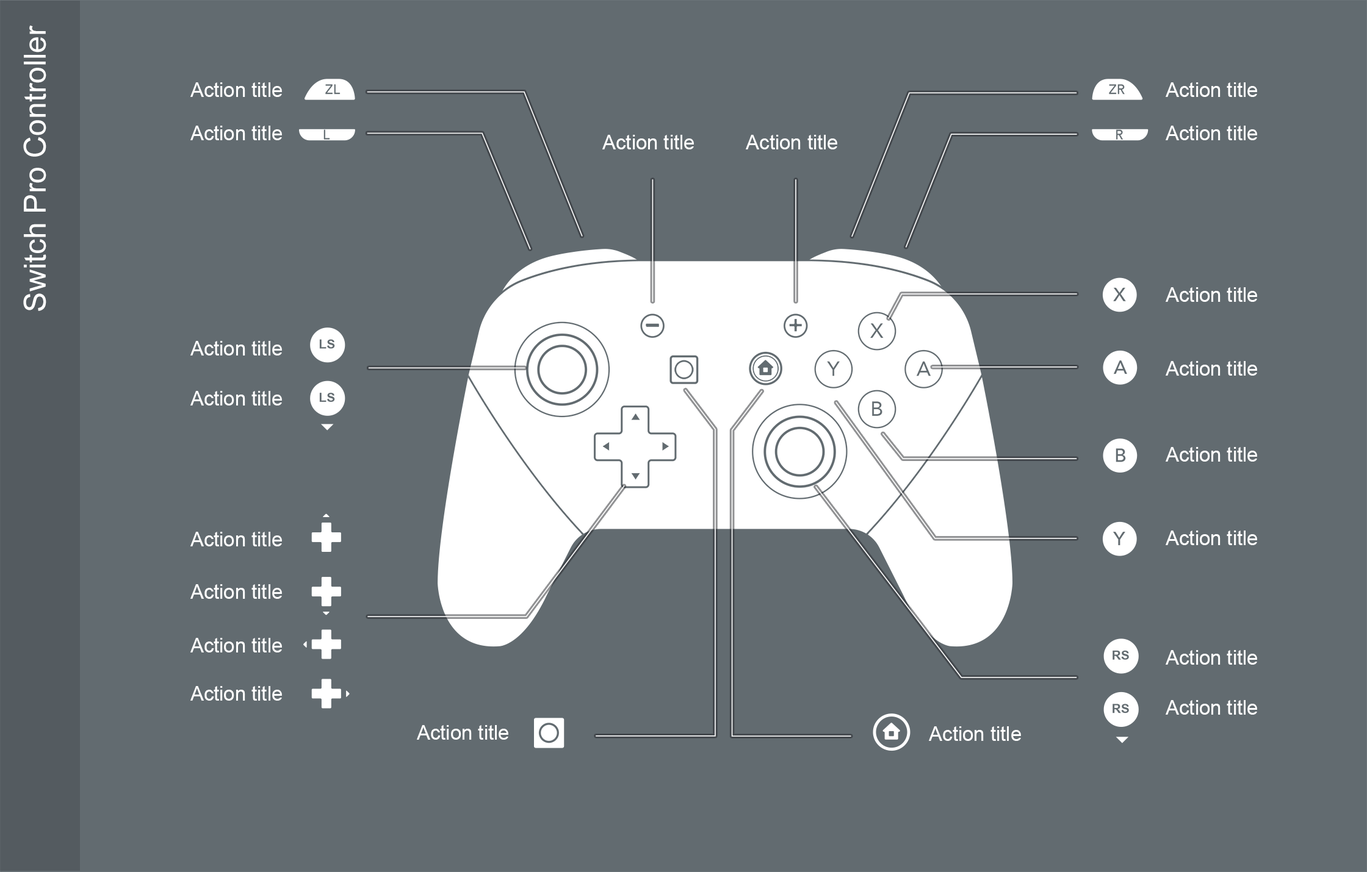
<style>
.page{position:relative;width:1367px;height:872px;background:#626b70}
.page>*{position:absolute;margin:0}
.t1{font:30.5px "ArialMT";color:#ffffff}
.t2{font:20px "ArialMT";color:#ffffff}
</style>
<div class="page">
<p class="t1" style="left:23px;top:25px;width:23px;height:286px;rotate:-90deg">Switch Pro Controller</p>
<p class="t2" style="left:190px;top:82px;width:92px;height:15px">Action title</p>
<p class="t2" style="left:1165px;top:82px;width:92px;height:15px">Action title</p>
<p class="t2" style="left:190px;top:126px;width:92px;height:14px">Action title</p>
<p class="t2" style="left:1165px;top:126px;width:92px;height:14px">Action title</p>
<p class="t2" style="left:602px;top:135px;width:92px;height:14px">Action title</p>
<p class="t2" style="left:746px;top:135px;width:91px;height:14px">Action title</p>
<p class="t2" style="left:1165px;top:287px;width:92px;height:15px">Action title</p>
<p class="t2" style="left:190px;top:341px;width:92px;height:15px">Action title</p>
<p class="t2" style="left:1165px;top:361px;width:92px;height:15px">Action title</p>
<p class="t2" style="left:190px;top:391px;width:92px;height:15px">Action title</p>
<p class="t2" style="left:1165px;top:447px;width:92px;height:15px">Action title</p>
<p class="t2" style="left:190px;top:532px;width:92px;height:15px">Action title</p>
<p class="t2" style="left:1165px;top:531px;width:92px;height:14px">Action title</p>
<p class="t2" style="left:190px;top:585px;width:92px;height:14px">Action title</p>
<p class="t2" style="left:190px;top:638px;width:92px;height:15px">Action title</p>
<p class="t2" style="left:1165px;top:650px;width:92px;height:15px">Action title</p>
<p class="t2" style="left:190px;top:686px;width:92px;height:15px">Action title</p>
<p class="t2" style="left:1165px;top:700px;width:92px;height:15px">Action title</p>
<p class="t2" style="left:417px;top:725px;width:91px;height:15px">Action title</p>
<p class="t2" style="left:929px;top:727px;width:92px;height:14px">Action title</p>
</div>
